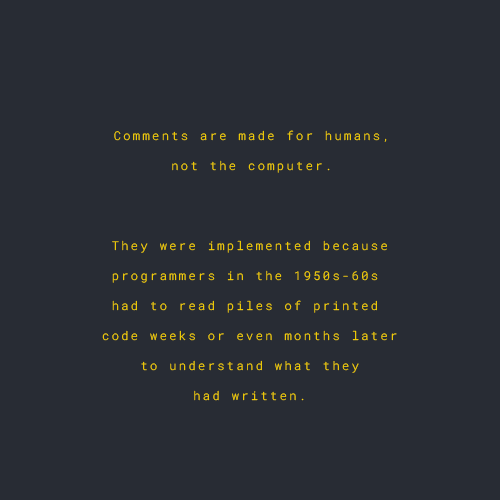
<style>
.page{position:relative;width:500px;height:500px;background:#282c34}
.page>*{position:absolute;margin:0}
.t1{font:12px/30px "RobotoMono-Light";letter-spacing:0.2em;color:#ffd800}
</style>
<div class="page">
<p class="t1" style="left:114px;top:130px;width:273px;height:43px;text-align:center">Comments are made for humans,<br>not the computer.</p>
<p class="t1" style="left:102px;top:240px;width:295px;height:161px;text-align:center">They were implemented because<br>programmers in the 1950s-60s <br>had to read piles of printed <br>code weeks or even months later<br>to understand what they<br>had written.</p>
</div>
